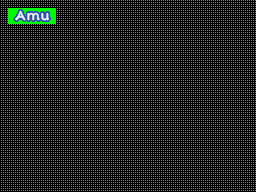
<style>
.page{position:relative;width:256px;height:192px;background:#000000}
.page>*{position:absolute;margin:0}
.t1{font:16.5px "DFLeiShoStd-W5";letter-spacing:0.075em;color:#ffffff}
</style>
<div class="page">
<p class="t1" style="left:15px;top:11px;width:34px;height:9px">Amu</p>
</div>
